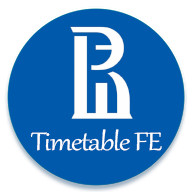
<style>
.page{position:relative;width:192px;height:192px;background:#0059ab}
.page>*{position:absolute;margin:0}
.t1{font:31px "Gabriola";letter-spacing:-0.035em;color:#ffffff;scale:1.17 1}
</style>
<div class="page">
<p class="t1" style="left:30px;top:129px;width:132px;height:22px">Timetable FE</p>
</div>
